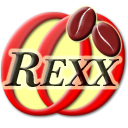
<style>
.page{position:relative;width:128px;height:128px;background:#ffffff}
.page>*{position:absolute;margin:0}
.t1{font:40px "NewBaskerville-BoldItalic";letter-spacing:0.025em}
.t2{font:52px "NewBaskerville-BoldItalic";letter-spacing:0.025em}
</style>
<div class="page">
<p class="t1" style="left:4px;top:52px;width:115px;height:35px"><span class="t2">R</span>EXX</p>
</div>
